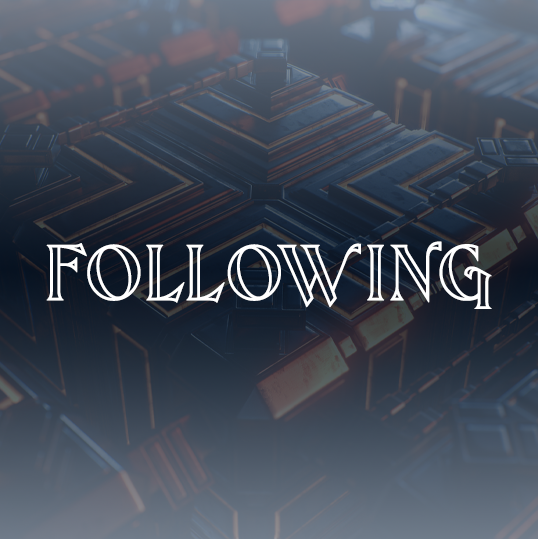
<style>
.page{position:relative;width:538px;height:539px}
.page>*{position:absolute;margin:0}
.t1{font:100px "RabbitMoon-Open";letter-spacing:0.02em;color:#ffffff;text-transform:uppercase;font-weight:bold}
</style>
<div class="page">
<p class="t1" style="left:46px;top:241px;width:446px;height:68px">following</p>
</div>
